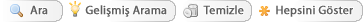
<style>
.page{position:relative;width:363px;height:22px;background:#ffffff}
.page>*{position:absolute;margin:0}
.t1{font:12px "MyriadPro-Regular";color:#5f5f5f;font-weight:bold}
</style>
<div class="page">
<p class="t1" style="left:30px;top:5px;width:323px;height:12px">Ara             Gelişmiş Arama             Temizle           Hepsini Göster</p>
</div>
